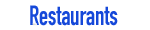
<style>
.page{position:relative;width:150px;height:30px;background:#ffffff}
.page>*{position:absolute;margin:0}
.t1{font:27.5px "DINCondensed-Bold";color:#1548d9;scale:0.87 1}
</style>
<div class="page">
<p class="t1" style="left:30px;top:5px;width:88px;height:21px">Restaurants</p>
</div>
